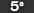
<style>
.page{position:relative;width:34px;height:13px;background:#333333}
.page>*{position:absolute;margin:0}
.t1{font:13.9px "K2D-ExtraBold";color:#ffffff}
</style>
<div class="page">
<p class="t1" style="left:10px;top:1px;width:14px;height:11px">5a</p>
</div>
